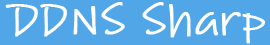
<style>
.page{position:relative;width:270px;height:45px;background:#51a6e7}
.page>*{position:absolute;margin:0}
.t1{font:45.6px "Lindsey";color:#ffffff;font-weight:bold}
</style>
<div class="page">
<p class="t1" style="left:5px;top:2px;width:260px;height:42px">DDNS Sharp</p>
</div>
